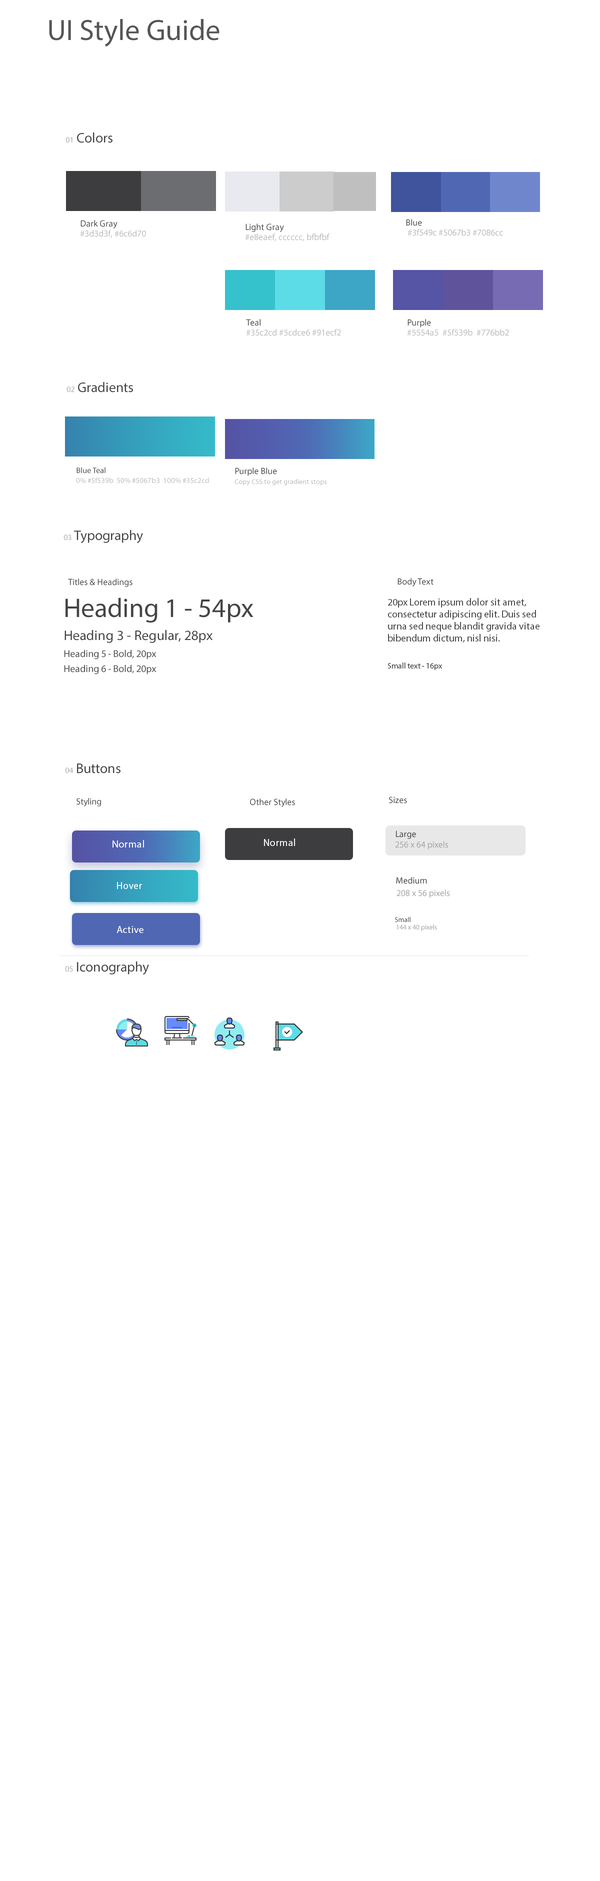
<style>
.page{position:relative;width:600px;height:1881px;background:#ffffff}
.page>*{position:absolute;margin:0}
.t1{font:29.5px "MyriadPro-Regular";color:#555555}
.t2{font:14px "MyriadPro-Regular";color:#444444}
.t3{font:8px "MyriadPro-Regular";color:#aaaaaa}
.t4{font:9px/10px "MyriadPro-Regular";color:#bbbbbb}
.t5{font:9px "MyriadPro-Regular";color:#444444}
.t6{font:7.5px/10px "MyriadPro-Regular";color:#bbbbbb}
.t7{font:8px "MyriadPro-Regular";color:#444444}
.t8{font:7px/10px "MyriadPro-Regular";color:#bbbbbb}
.t9{font:14px/23px "MyriadPro-Regular";color:#444444}
.t10{font:27px/25px "MyriadPro-Regular";color:#444444}
.t11{font:10px/17px "MyriadPro-Regular";color:#444444}
.t12{font:10px/15px "MyriadPro-Regular";color:#444444}
.t13{font:10px/12px "MyriadPro-Regular";color:#3d3d3f}
.t14{font:8px/15px "MyriadPro-Regular";color:#444444}
.t15{font:9px "MyriadPro-Regular";color:#3b3b3b}
.t16{font:10px "MyriadPro-Regular";letter-spacing:0.025em;color:#ffffff}
.t17{font:9px "MyriadPro-Regular";color:#a4a4a4}
.t18{font:7px "MyriadPro-Regular";color:#3b3b3b}
.t19{font:7px "MyriadPro-Regular";color:#a4a4a4}
</style>
<div class="page">
<p class="t1" style="left:49px;top:19px;width:171px;height:27px">UI Style Guide</p>
<p class="t2" style="left:66px;top:132px;width:46px;height:11px"><span class="t3">01</span> Colors</p>
<p class="t4" style="left:80px;top:220px;width:66px;height:18px"><span class="t5">Dark Gray<br></span>#3d3d3f, #6c6d70</p>
<p class="t4" style="left:406px;top:219px;width:97px;height:17px"><span class="t5">Blue<br></span> #3f549c #5067b3 #7086cc</p>
<p class="t4" style="left:245px;top:224px;width:85px;height:18px"><span class="t5">Light Gray<br></span>#e8eaef, cccccc, bfbfbf</p>
<p class="t4" style="left:246px;top:319px;width:95px;height:17px"><span class="t5">Teal<br></span>#35c2cd #5cdce6 #91ecf2</p>
<p class="t4" style="left:407px;top:319px;width:102px;height:17px"><span class="t5">Purple<br></span>#5554a5  #5f539b  #776bb2</p>
<p class="t2" style="left:66px;top:382px;width:67px;height:10px"><span class="t3">02</span> Gradients</p>
<p class="t6" style="left:76px;top:467px;width:133px;height:16px"><span class="t7">Blue Teal<br></span>0% #5f539b  50% #5067b3  100% #35c2cd</p>
<p class="t8" style="left:234px;top:468px;width:93px;height:18px"><span class="t5">Purple Blue<br></span>Copy CSS to get gradient stops</p>
<p class="t2" style="left:64px;top:530px;width:79px;height:14px"><span class="t3">03</span> Typography</p>
<p class="t5" style="left:68px;top:578px;width:64px;height:9px">Titles &amp; Headings</p>
<p class="t5" style="left:398px;top:578px;width:36px;height:8px">Body Text</p>
<p class="t9" style="left:64px;top:598px;width:190px;height:76px"><span class="t10">Heading 1 - 54px<br></span>Heading 3 - Regular, 28px<br><span class="t11">Heading 5 - Bold, 20px<br></span><span class="t12">Heading 6 - Bold, 20px</span></p>
<p class="t13" style="left:388px;top:598px;width:152px;height:72px">20px Lorem ipsum dolor sit amet, consectetur adipiscing elit. Duis sed urna sed neque blandit gravida vitae bibendum dictum, nisl nisi.<br><br><span class="t14">Small text - 16px</span></p>
<p class="t2" style="left:65px;top:764px;width:55px;height:10px"><span class="t3">04</span> Buttons</p>
<p class="t5" style="left:76px;top:798px;width:25px;height:8px">Styling</p>
<p class="t5" style="left:389px;top:796px;width:18px;height:8px">Sizes</p>
<p class="t5" style="left:250px;top:798px;width:45px;height:9px">Other Styles</p>
<p class="t15" style="left:396px;top:830px;width:20px;height:9px">Large</p>
<p class="t16" style="left:112px;top:840px;width:32px;height:8px">Normal</p>
<p class="t16" style="left:264px;top:838px;width:31px;height:8px">Normal</p>
<p class="t17" style="left:395px;top:841px;width:53px;height:9px">256 x 64 pixels</p>
<p class="t15" style="left:396px;top:877px;width:31px;height:7px">Medium</p>
<p class="t16" style="left:117px;top:882px;width:25px;height:7px">Hover</p>
<p class="t17" style="left:396px;top:890px;width:54px;height:8px">208 x 56 pixels</p>
<p class="t18" style="left:395px;top:917px;width:15px;height:5px">Small</p>
<p class="t16" style="left:116px;top:926px;width:28px;height:7px">Active</p>
<p class="t19" style="left:396px;top:924px;width:41px;height:7px">144 x 40 pixels</p>
<p class="t2" style="left:65px;top:962px;width:84px;height:13px"><span class="t3">05</span> Iconography</p>
</div>
